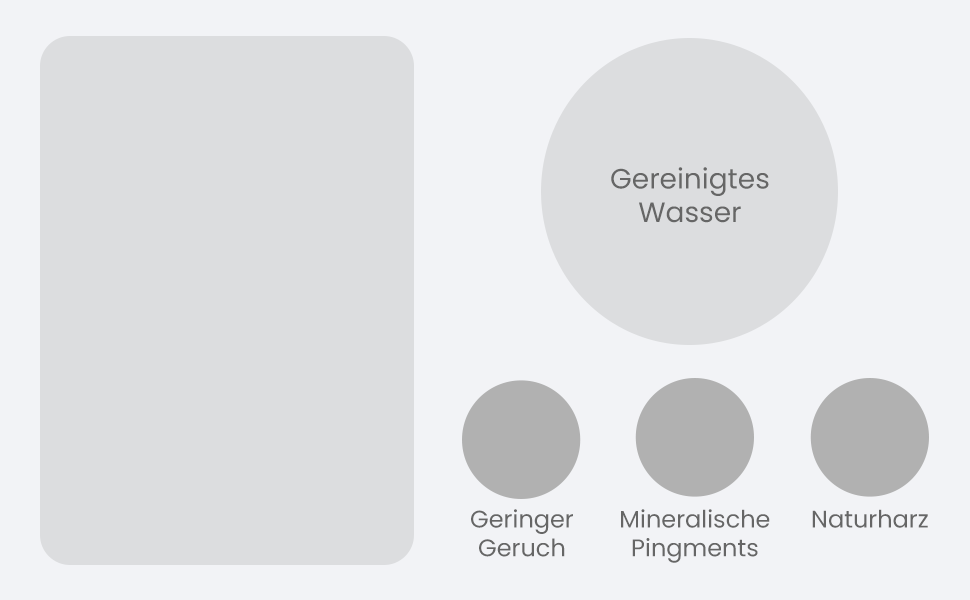
<style>
.page{position:relative;width:970px;height:600px;background:#f2f3f6}
.page>*{position:absolute;margin:0}
.t1{font:28px "Poppins-Regular";color:#666666}
.t2{font:24px "Poppins-Regular";color:#666666}
</style>
<div class="page">
<p class="t1" style="left:611px;top:167px;width:158px;height:56px;text-align:center">Gereinigtes<br>Wasser</p>
<p class="t2" style="left:471px;top:509px;width:102px;height:48px;text-align:center">Geringer<br>Geruch</p>
<p class="t2" style="left:621px;top:509px;width:149px;height:54px;text-align:center">Mineralische<br>Pingments</p>
<p class="t2" style="left:812px;top:509px;width:116px;height:19px">Naturharz</p>
</div>
